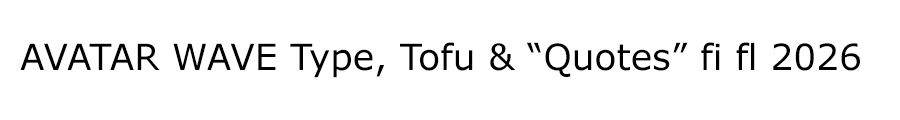
<style>
.page{position:relative;width:900px;height:120px;background:#ffffff}
.page>*{position:absolute;margin:0}
.t1{font:36px "Verdana";color:#000000}
</style>
<div class="page">
<p class="t1" style="left:20px;top:42px;width:840px;height:36px">AVATAR WAVE Type, Tofu &amp; “Quotes” fi fl 2026</p>
</div>
